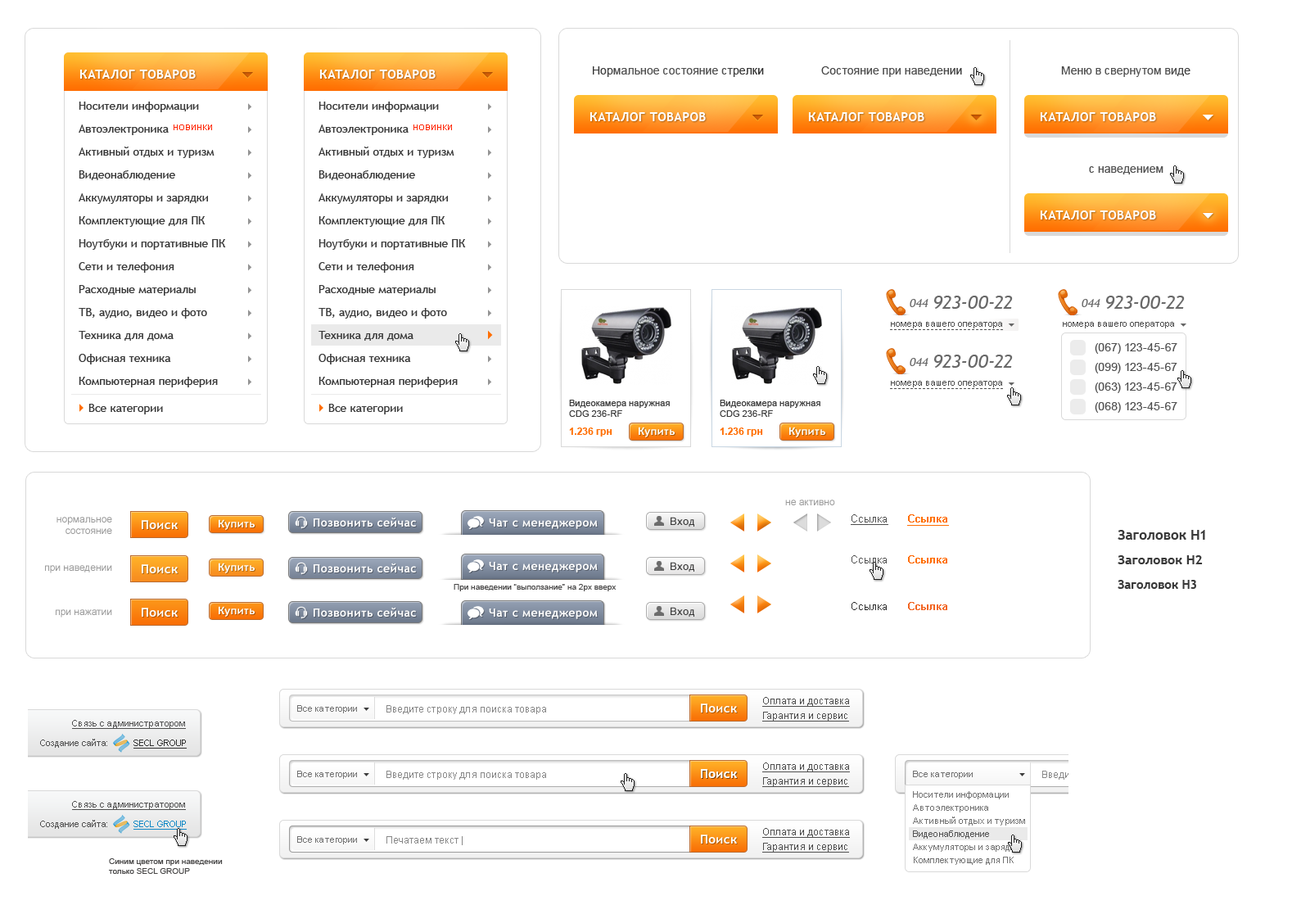
<style>
.page{position:relative;width:1292px;height:923px;background:#ffffff}
.page>*{position:absolute;margin:0}
.t1{font:12.3px "TrebuchetMS-Bold";letter-spacing:0.03em;color:#ffffff}
.t2{font:11.5px "ArialMT";color:#505050}
.t3{font:11.5px "ArialMT";color:#515151}
.t4{font:11.5px "ArialMT";color:#525252}
.t5{font:11.5px/22.9px "TrebuchetMS";color:#393939}
.t6{font:8.2px "ArialMT";color:#ff2400}
.t7{font:11.5px "TrebuchetMS-Italic";color:#696969}
.t8{font:18.8px "TrebuchetMS-Italic";color:#696969}
.t9{font:9px "ArialMT";color:#4f4f4f}
.t10{font:11.5px "ArialMT";color:#4f4f4f}
.t11{font:9px "ArialMT";color:#3a3a3a}
.t12{font:9.8px "Arial-BoldMT";color:#ff6e01}
.t13{font:10.6px "TrebuchetMS-Bold";letter-spacing:0.03em;color:#ffffff}
.t14{font:9.8px "ArialMT";color:#999999}
.t15{font:11.5px "TrebuchetMS-Bold";letter-spacing:0.03em;color:#ffffff}
.t16{font:10.6px "ArialMT";letter-spacing:0.04em;color:#393939}
.t17{font:10.6px "ArialMT";color:#4f4f4f;text-decoration:underline}
.t18{font:10.6px "Arial-BoldMT";color:#ff6e01;text-decoration:underline}
.t19{font:13.9px "TrebuchetMS-Bold";color:#393939}
.t20{font:10.6px "ArialMT";color:#4f4f4f}
.t21{font:10.6px "Arial-BoldMT";color:#ff6e01}
.t22{font:13.1px "TrebuchetMS-Bold";color:#393939}
.t23{font:12.3px "TrebuchetMS-Bold";color:#393939}
.t24{font:8.2px "ArialMT";color:#494848}
.t25{font:10.6px "ArialMT";color:#2c2c2c}
.t26{font:10.6px "Arial-BoldMT";color:#f26522}
.t27{font:9.8px "ArialMT";color:#4f4f4f;text-decoration:underline}
.t28{font:9px "ArialMT";color:#727272}
.t29{font:9.8px "ArialMT";color:#888888}
.t30{font:9px "ArialMT";color:#4f4f4f;text-decoration:underline}
.t31{font:9px "ArialMT";color:#303030;text-decoration:underline}
.t32{font:9px/13.1px "ArialMT";color:#727272}
.t33{font:9px/13.1px "ArialMT";color:#545454}
.t34{font:9px "ArialMT";color:#0f87c5;text-decoration:underline}
</style>
<div class="page">
<p class="t1" style="left:79px;top:70px;width:117px;height:9px">КАТАЛОГ ТОВАРОВ</p>
<p class="t1" style="left:319px;top:70px;width:117px;height:9px">КАТАЛОГ ТОВАРОВ</p>
<p class="t2" style="left:593px;top:66px;width:171px;height:11px">Нормальное состояние стрелки</p>
<p class="t3" style="left:821px;top:66px;width:141px;height:11px">Состояние при наведении</p>
<p class="t4" style="left:1061px;top:66px;width:130px;height:11px">Меню в свернутом виде</p>
<p class="t5" style="left:79px;top:102px;width:147px;height:312px">Носители информации<br>Автоэлектроника<br>Активный отдых и туризм<br>Видеонаблюдение<br>Аккумуляторы и зарядки<br>Комплектующие для ПК<br>Ноутбуки и портативные ПК<br>Сети и телефония<br>Расходные материалы<br>ТВ, аудио, видео и фото<br>Техника для дома<br>Офисная техника<br>Компьютерная периферия<br>Все категории</p>
<p class="t5" style="left:319px;top:102px;width:147px;height:312px">Носители информации<br>Автоэлектроника<br>Активный отдых и туризм<br>Видеонаблюдение<br>Аккумуляторы и зарядки<br>Комплектующие для ПК<br>Ноутбуки и портативные ПК<br>Сети и телефония<br>Расходные материалы<br>ТВ, аудио, видео и фото<br>Техника для дома<br>Офисная техника<br>Компьютерная периферия<br>Все категории</p>
<p class="t1" style="left:590px;top:112px;width:116px;height:9px">КАТАЛОГ ТОВАРОВ</p>
<p class="t1" style="left:808px;top:112px;width:116px;height:9px">КАТАЛОГ ТОВАРОВ</p>
<p class="t1" style="left:1040px;top:112px;width:116px;height:9px">КАТАЛОГ ТОВАРОВ</p>
<p class="t6" style="left:174px;top:124px;width:38px;height:6px">НОВИНКИ</p>
<p class="t6" style="left:414px;top:124px;width:38px;height:6px">НОВИНКИ</p>
<p class="t4" style="left:1089px;top:166px;width:75px;height:8px">с наведением</p>
<p class="t1" style="left:1040px;top:210px;width:116px;height:9px">КАТАЛОГ ТОВАРОВ</p>
<p class="t7" style="left:910px;top:299px;width:19px;height:8px">044</p>
<p class="t8" style="left:934px;top:296px;width:79px;height:13px">923-00-22</p>
<p class="t7" style="left:1082px;top:299px;width:19px;height:8px">044</p>
<p class="t8" style="left:1106px;top:296px;width:79px;height:13px">923-00-22</p>
<p class="t9" style="left:891px;top:322px;width:111px;height:6px">номера вашего оператора</p>
<p class="t9" style="left:1063px;top:322px;width:111px;height:6px">номера вашего оператора</p>
<p class="t10" style="left:1095px;top:343px;width:82px;height:11px">(067) 123-45-67</p>
<p class="t7" style="left:910px;top:358px;width:19px;height:8px">044</p>
<p class="t8" style="left:934px;top:355px;width:79px;height:13px">923-00-22</p>
<p class="t10" style="left:1095px;top:363px;width:82px;height:10px">(099) 123-45-67</p>
<p class="t9" style="left:891px;top:381px;width:111px;height:6px">номера вашего оператора</p>
<p class="t10" style="left:1095px;top:382px;width:82px;height:11px">(063) 123-45-67</p>
<p class="t11" style="left:569px;top:400px;width:101px;height:17px">Видеокамера наружная <br>СDG 236-RF</p>
<p class="t11" style="left:720px;top:400px;width:100px;height:17px">Видеокамера наружная <br>СDG 236-RF</p>
<p class="t10" style="left:1095px;top:402px;width:82px;height:11px">(068) 123-45-67</p>
<p class="t12" style="left:569px;top:427px;width:43px;height:9px">1.236 грн</p>
<p class="t13" style="left:639px;top:427px;width:36px;height:10px">Купить</p>
<p class="t12" style="left:720px;top:427px;width:43px;height:9px">1.236 грн</p>
<p class="t13" style="left:789px;top:427px;width:36px;height:10px">Купить</p>
<p class="t14" style="left:785px;top:499px;width:50px;height:6px">не активно</p>
<p class="t14" style="left:57px;top:517px;width:55px;height:17px;text-align:right">нормальное<br>состояние</p>
<p class="t1" style="left:142px;top:520px;width:36px;height:9px">Поиск</p>
<p class="t13" style="left:219px;top:519px;width:36px;height:11px">Купить</p>
<p class="t15" style="left:314px;top:517px;width:102px;height:10px">Позвонить сейчас</p>
<p class="t15" style="left:489px;top:518px;width:109px;height:11px">Чат с менеджером</p>
<p class="t16" style="left:671px;top:517px;width:23px;height:10px">Вход</p>
<p class="t17" style="left:851px;top:514px;width:37px;height:11px">Ссылка</p>
<p class="t18" style="left:907px;top:514px;width:42px;height:12px">Ссылка</p>
<p class="t19" style="left:1118px;top:530px;width:87px;height:10px">Заголовок H1</p>
<p class="t20" style="left:852px;top:555px;width:35px;height:8px">Ссылка</p>
<p class="t21" style="left:908px;top:555px;width:39px;height:8px">Ссылка</p>
<p class="t22" style="left:1118px;top:555px;width:85px;height:9px">Заголовок H2</p>
<p class="t14" style="left:45px;top:565px;width:67px;height:8px">при наведении</p>
<p class="t1" style="left:142px;top:564px;width:36px;height:9px">Поиск</p>
<p class="t13" style="left:219px;top:563px;width:36px;height:10px">Купить</p>
<p class="t15" style="left:314px;top:563px;width:102px;height:9px">Позвонить сейчас</p>
<p class="t15" style="left:489px;top:562px;width:109px;height:10px">Чат с менеджером</p>
<p class="t16" style="left:671px;top:562px;width:23px;height:10px">Вход</p>
<p class="t23" style="left:1118px;top:580px;width:78px;height:9px">Заголовок H3</p>
<p class="t24" style="left:454px;top:584px;width:163px;height:7px">При наведении “выползание” на 2px вверх</p>
<p class="t13" style="left:219px;top:606px;width:36px;height:11px">Купить</p>
<p class="t25" style="left:852px;top:602px;width:35px;height:8px">Ссылка</p>
<p class="t26" style="left:908px;top:602px;width:39px;height:8px">Ссылка</p>
<p class="t14" style="left:56px;top:609px;width:56px;height:8px">при нажатии</p>
<p class="t1" style="left:142px;top:608px;width:36px;height:9px">Поиск</p>
<p class="t15" style="left:314px;top:607px;width:102px;height:10px">Позвонить сейчас</p>
<p class="t15" style="left:489px;top:608px;width:109px;height:11px">Чат с менеджером</p>
<p class="t16" style="left:671px;top:607px;width:23px;height:10px">Вход</p>
<p class="t27" style="left:762px;top:697px;width:88px;height:10px">Оплата и доставка</p>
<p class="t28" style="left:297px;top:705px;width:60px;height:8px">Все категории</p>
<p class="t29" style="left:386px;top:705px;width:160px;height:9px">Введите строку для поиска товара</p>
<p class="t1" style="left:701px;top:703px;width:36px;height:9px">Поиск</p>
<p class="t27" style="left:762px;top:712px;width:87px;height:9px">Гарантия и сервис</p>
<p class="t30" style="left:72px;top:720px;width:114px;height:9px">Связь с администратором</p>
<p class="t9" style="left:40px;top:739px;width:67px;height:9px">Создание сайта:</p>
<p class="t31" style="left:133px;top:739px;width:54px;height:9px">SECL GROUP</p>
<p class="t28" style="left:297px;top:771px;width:60px;height:8px">Все категории</p>
<p class="t29" style="left:386px;top:771px;width:160px;height:9px">Введите строку для поиска товара</p>
<p class="t1" style="left:701px;top:769px;width:36px;height:9px">Поиск</p>
<p class="t1" style="left:701px;top:769px;width:36px;height:9px">Поиск</p>
<p class="t27" style="left:762px;top:762px;width:88px;height:10px">Оплата и доставка</p>
<p class="t28" style="left:913px;top:771px;width:60px;height:8px">Все категории</p>
<p class="t27" style="left:762px;top:777px;width:87px;height:10px">Гарантия и сервис</p>
<p class="t32" style="left:913px;top:791px;width:112px;height:74px">Носители информации<br>Автоэлектроника<br>Активный отдых и туризм<br><span class="t33">Видеонаблюдение<br></span>Аккумуляторы и зарядки<br>Комплектующие для ПК</p>
<p class="t30" style="left:72px;top:801px;width:114px;height:9px">Связь с администратором</p>
<p class="t9" style="left:40px;top:820px;width:67px;height:9px">Создание сайта:</p>
<p class="t34" style="left:133px;top:820px;width:54px;height:9px">SECL GROUP</p>
<p class="t27" style="left:762px;top:828px;width:88px;height:10px">Оплата и доставка</p>
<p class="t28" style="left:297px;top:836px;width:60px;height:8px">Все категории</p>
<p class="t29" style="left:386px;top:836px;width:77px;height:9px">Печатаем текст |</p>
<p class="t1" style="left:701px;top:834px;width:36px;height:9px">Поиск</p>
<p class="t27" style="left:762px;top:843px;width:87px;height:9px">Гарантия и сервис</p>
<p class="t24" style="left:109px;top:858px;width:114px;height:16px">Синим цветом при наведении<br>только SECL GROUP</p>
</div>
